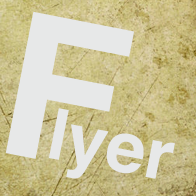
<style>
.page{position:relative;width:196px;height:196px;background:#e7e8e8}
.page>*{position:absolute;margin:0}
.t1{font:200px "HelveticaLTStd-Bold";color:#e7e8e8}
.t2{font:70.6px "HelveticaLTStd-Bold";color:#e7e8e8}
</style>
<div class="page">
<p class="t1" style="left:5px;top:11px;width:129px;height:148px;rotate:11deg">F</p>
<p class="t2" style="left:49px;top:108px;width:126px;height:71px;rotate:11deg">lyer</p>
</div>
